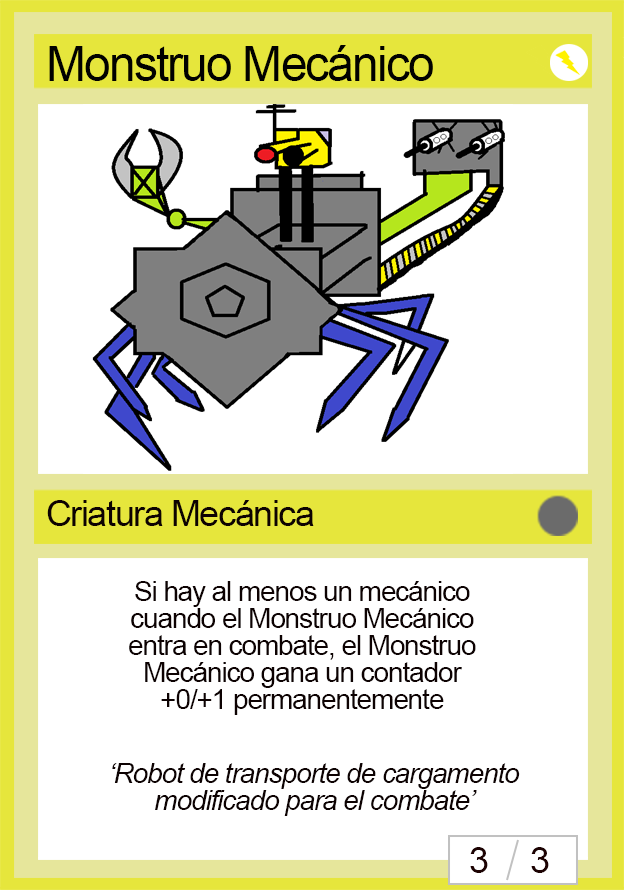
<style>
.page{position:relative;width:624px;height:890px;background:#ffffff}
.page>*{position:absolute;margin:0}
.t1{font:48px "ArialMT";letter-spacing:-0.04em;color:#010100}
.t2{font:36px "ArialMT";letter-spacing:-0.04em;color:#0d0202}
.t3{font:28px/27px "ArialMT";letter-spacing:-0.04em;color:#0d0202}
.t4{font:28px/27px "Arial-ItalicMT";letter-spacing:-0.04em;color:#0d0202}
.t5{font:36px "ArialMT";letter-spacing:-0.04em;color:#1d0202}
</style>
<div class="page">
<p class="t1" style="left:49px;top:45px;width:384px;height:36px">Monstruo Mecánico</p>
<p class="t2" style="left:47px;top:500px;width:267px;height:26px">Criatura Mecánica</p>
<p class="t3" style="left:129px;top:581px;width:347px;height:134px;text-align:center">Si hay al menos un mecánico cuando el Monstruo Mecánico entra en combate, el Monstruo Mecánico gana un contador +0/+1 permanentemente</p>
<p class="t4" style="left:112px;top:763px;width:408px;height:53px;text-align:center">‘Robot de transporte de cargamento modificado para el combate’</p>
<p class="t5" style="left:470px;top:847px;width:18px;height:26px">3</p>
<p class="t5" style="left:531px;top:847px;width:18px;height:26px">3</p>
</div>
